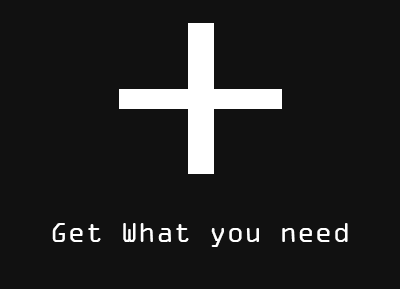
<style>
.page{position:relative;width:400px;height:289px;background:#111111}
.page>*{position:absolute;margin:0}
.t1{font:29.2px "OCRAExtended";color:#ffffff}
</style>
<div class="page">
<p class="t1" style="left:52px;top:223px;width:296px;height:24px">Get What you need</p>
</div>
